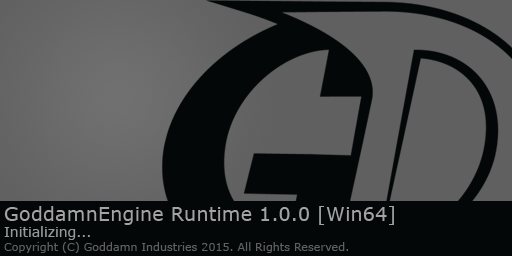
<style>
.page{position:relative;width:512px;height:256px;background:#040707}
.page>*{position:absolute;margin:0}
.t1{font:11.1px "Verdana";color:#606060}
.t2{font:19.4px "Verdana";color:#a3a3a3}
.t3{font:13.9px "Verdana";color:#989999}
</style>
<div class="page">
<p class="t1" style="left:4px;top:206px;width:390px;height:47px"><span class="t2">GoddamnEngine Runtime 1.0.0 [Win64]<br></span><span class="t3">Initializing...<br></span>Copyright (C) Goddamn Industries 2015. All Rights Reserved.</p>
</div>
